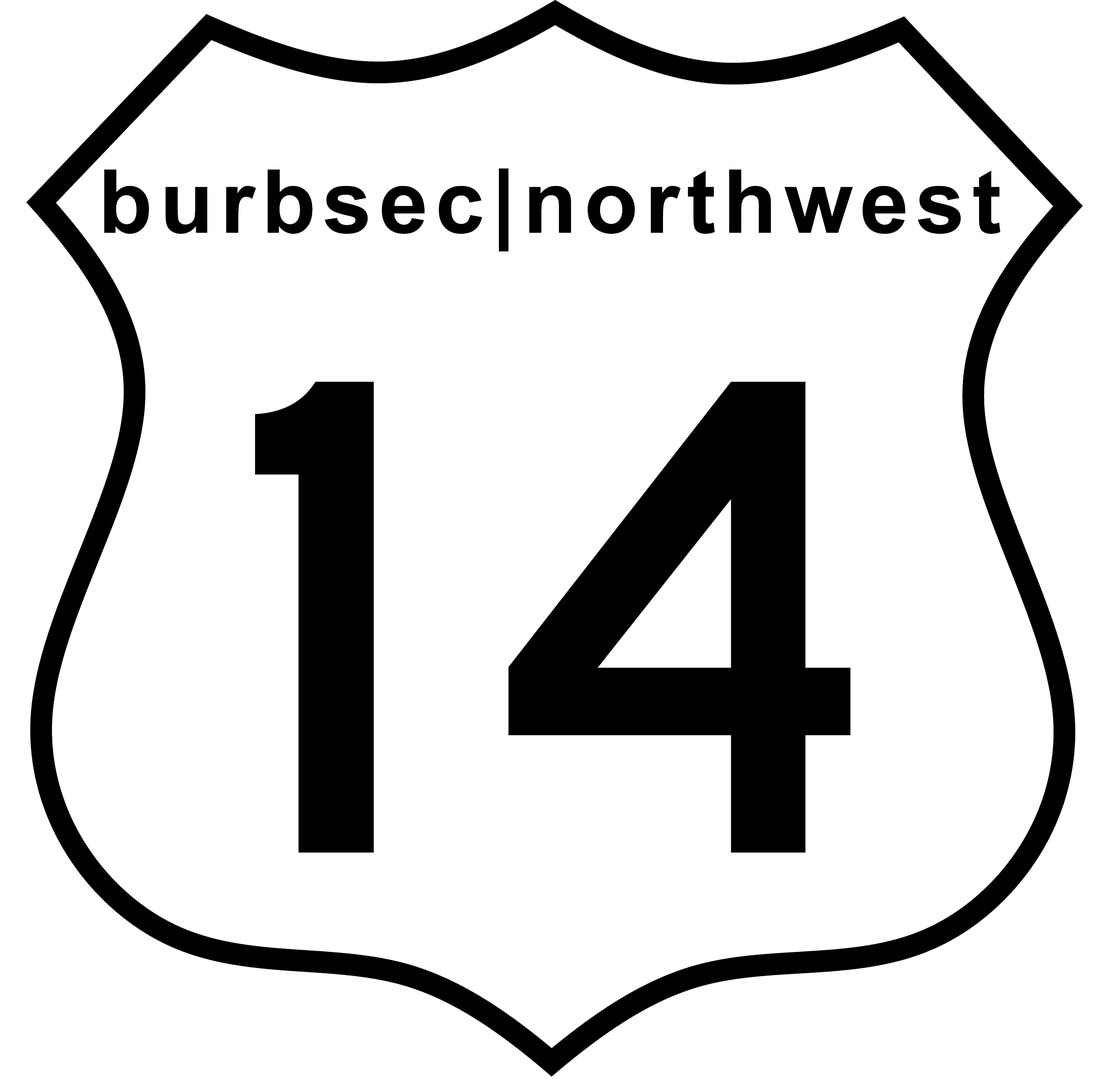
<style>
.page{position:relative;width:1105px;height:1079px;background:#ffffff}
.page>*{position:absolute;margin:0}
.t1{font:88.3px "Arial-BoldMT";letter-spacing:0.08em;color:#000000}
.t2{font:702.3px "HighwayGothic";letter-spacing:0.08em;color:#000000}
</style>
<div class="page">
<p class="t1" style="left:104px;top:168px;width:897px;height:84px">burbsec|northwest</p>
<p class="t2" style="left:255px;top:382px;width:596px;height:470px">14</p>
</div>
